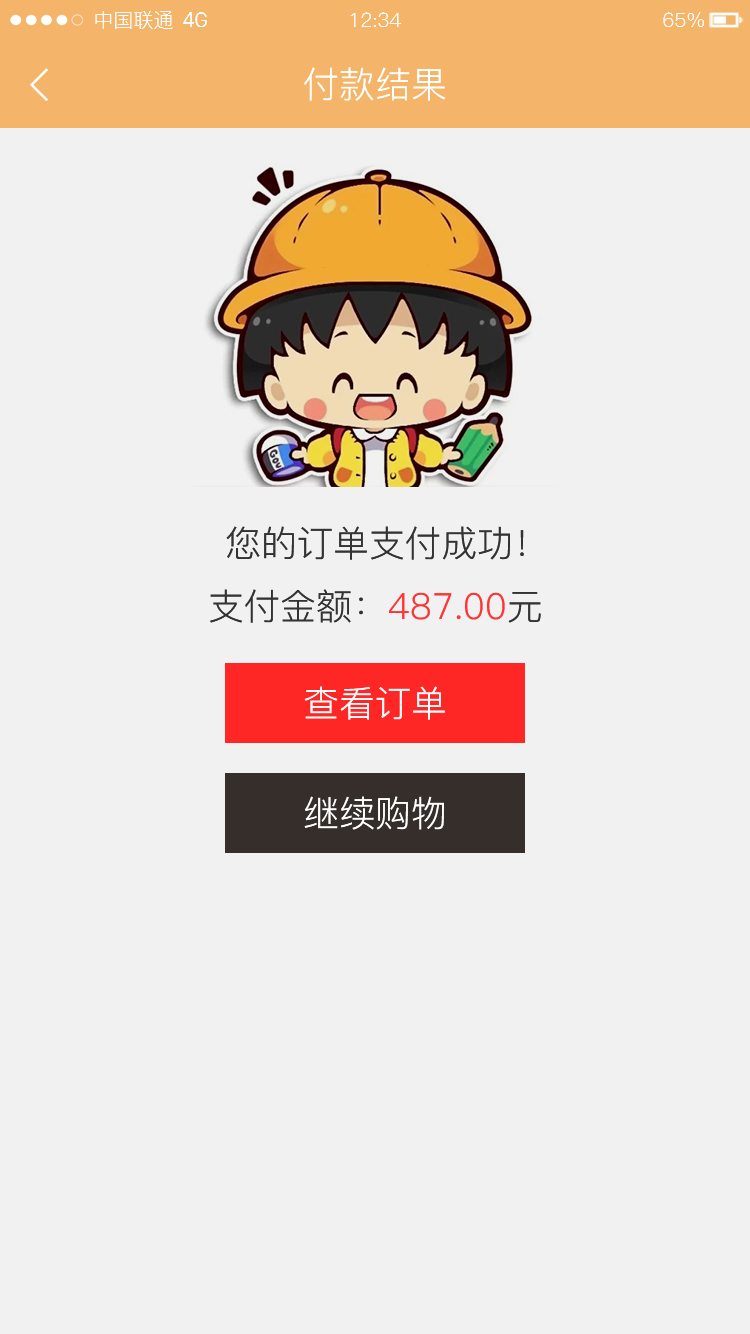
<style>
.page{position:relative;width:750px;height:1334px;background:#f1f1f1}
.page>*{position:absolute;margin:0}
.t1{font:20px "PingFang-SC-Regular";color:#fefefe}
.t2{font:20px "SanFranciscoDisplay";color:#fefefe}
.t3{font:36px "PingFang-SC-Regular";color:#ffffff}
.t4{font:36px "PingFang-SC-Regular";color:#333333}
.t5{font:36px "PingFang-SC-Regular";color:#ff3535}
</style>
<div class="page">
<p class="t1" style="left:95px;top:11px;width:78px;height:18px">中国联通</p>
<p class="t2" style="left:183px;top:12px;width:24px;height:15px">4G</p>
<p class="t1" style="left:350px;top:12px;width:51px;height:15px">12:34</p>
<p class="t1" style="left:663px;top:12px;width:41px;height:15px">65%</p>
<p class="t3" style="left:304px;top:67px;width:142px;height:34px">付款结果</p>
<p class="t4" style="left:226px;top:526px;width:298px;height:34px">您的订单支付成功！</p>
<p class="t5" style="left:209px;top:589px;width:332px;height:34px"><span class="t4">支付金额：</span>487.00<span class="t4">元</span></p>
<p class="t3" style="left:304px;top:686px;width:141px;height:34px">查看订单</p>
<p class="t3" style="left:304px;top:796px;width:140px;height:34px">继续购物</p>
</div>
